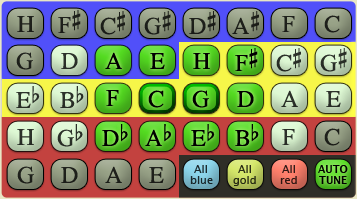
<style>
.page{position:relative;width:357px;height:199px}
.page>*{position:absolute;margin:0}
.t1{font:24px "OpusChords";color:#1e201b}
.t2{font:24px "OpusChords";color:#1d1f1a}
.t3{font:24px "OpusChords";color:#1c1e19}
.t4{font:24px "OpusChords";color:#1e201a}
.t5{font:24px "OpusChords";color:#2b3029}
.t6{font:24px "OpusChords";color:#000000}
.t7{font:24px "OpusChords";color:#2a2f28}
.t8{font:24px "OpusChords";color:#292e27}
.t9{font:24px "OpusChords";color:#2a3029}
.t10{font:24px "OpusChords";color:#2c312a}
.t11{font:24px "OpusChords";color:#2c322a}
.t12{font:11px "LucidaGrande";color:#1d2b2f}
.t13{font:11px "LucidaGrande";color:#2b2e16}
.t14{font:11px "LucidaGrande";color:#331a17}
.t15{font:10px "LucidaGrande-Bold";color:#000000}
.t16{font:11px "LucidaGrande";color:#000000}
.t17{font:11px "LucidaGrande";color:#192529}
.t18{font:11px "LucidaGrande";color:#252812}
.t19{font:11px "LucidaGrande";color:#2e1713}
</style>
<div class="page">
<p class="t1" style="left:17px;top:16px;width:17px;height:16px">H</p>
<p class="t1" style="left:58px;top:10px;width:23px;height:23px">F#</p>
<p class="t2" style="left:100px;top:11px;width:25px;height:24px">C#</p>
<p class="t3" style="left:144px;top:11px;width:27px;height:24px">G#</p>
<p class="t3" style="left:189px;top:11px;width:27px;height:23px">D#</p>
<p class="t3" style="left:232px;top:11px;width:27px;height:23px">A#</p>
<p class="t1" style="left:282px;top:16px;width:13px;height:16px">F</p>
<p class="t4" style="left:324px;top:15px;width:16px;height:18px">C</p>
<p class="t2" style="left:16px;top:52px;width:17px;height:18px">G</p>
<p class="t5" style="left:61px;top:53px;width:17px;height:16px">D</p>
<p class="t6" style="left:105px;top:52px;width:17px;height:17px">A</p>
<p class="t6" style="left:150px;top:53px;width:15px;height:16px">E</p>
<p class="t6" style="left:193px;top:53px;width:17px;height:16px">H</p>
<p class="t6" style="left:235px;top:48px;width:23px;height:23px">F#</p>
<p class="t7" style="left:276px;top:48px;width:25px;height:24px">C#</p>
<p class="t8" style="left:320px;top:48px;width:27px;height:24px">G#</p>
<p class="t9" style="left:16px;top:86px;width:24px;height:22px">Eb</p>
<p class="t5" style="left:60px;top:86px;width:24px;height:22px">Bb</p>
<p class="t6" style="left:106px;top:90px;width:13px;height:16px">F</p>
<p class="t6" style="left:148px;top:90px;width:16px;height:18px">C</p>
<p class="t6" style="left:192px;top:90px;width:17px;height:18px">G</p>
<p class="t6" style="left:237px;top:91px;width:17px;height:16px">D</p>
<p class="t5" style="left:281px;top:90px;width:17px;height:17px">A</p>
<p class="t10" style="left:326px;top:91px;width:15px;height:16px">E</p>
<p class="t7" style="left:57px;top:124px;width:26px;height:23px">Gb</p>
<p class="t6" style="left:102px;top:124px;width:26px;height:22px">Db</p>
<p class="t6" style="left:145px;top:124px;width:26px;height:22px">Ab</p>
<p class="t6" style="left:191px;top:124px;width:24px;height:22px">Eb</p>
<p class="t6" style="left:235px;top:124px;width:24px;height:22px">Bb</p>
<p class="t10" style="left:17px;top:129px;width:17px;height:16px">H</p>
<p class="t11" style="left:282px;top:129px;width:13px;height:16px">F</p>
<p class="t4" style="left:324px;top:128px;width:16px;height:18px">C</p>
<p class="t2" style="left:17px;top:166px;width:17px;height:18px">G</p>
<p class="t4" style="left:61px;top:167px;width:17px;height:16px">D</p>
<p class="t4" style="left:105px;top:166px;width:17px;height:17px">A</p>
<p class="t1" style="left:149px;top:167px;width:15px;height:16px">E</p>
<p class="t12" style="left:194px;top:165px;width:13px;height:8px">All</p>
<p class="t13" style="left:238px;top:165px;width:13px;height:8px">All</p>
<p class="t14" style="left:282px;top:165px;width:13px;height:8px">All</p>
<p class="t15" style="left:318px;top:165px;width:30px;height:8px"><span class="t16"> </span>AUTO</p>
<p class="t17" style="left:190px;top:176px;width:23px;height:8px">blue</p>
<p class="t18" style="left:233px;top:176px;width:23px;height:10px">gold</p>
<p class="t19" style="left:280px;top:176px;width:17px;height:8px">red</p>
<p class="t15" style="left:319px;top:176px;width:28px;height:8px">TUNE</p>
</div>
